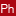
<style>
.page{position:relative;width:16px;height:16px;background:#aa0611}
.page>*{position:absolute;margin:0}
.t1{font:12px "Helvetica-Light";color:#ffffff}
</style>
<div class="page">
<p class="t1" style="left:1px;top:4px;width:13px;height:9px">Ph</p>
</div>
